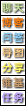
<style>
.page{position:relative;width:26px;height:106px}
.page>*{position:absolute;margin:0}
.t1{font:10.5px "FZY4JW--GB1-0";letter-spacing:0.1em;color:#c8e19d}
.t2{font:10.5px "FZY4JW--GB1-0";letter-spacing:0.1em;color:#ff7d0a}
.t3{font:10.5px "FZY4JW--GB1-0";letter-spacing:0.1em;color:#8dcff4}
.t4{font:10.5px "FZY4JW--GB1-0";letter-spacing:0.1em;color:#facd8a}
.t5{font:10.5px "FZY4JW--GB1-0";letter-spacing:0.1em;color:#fff569}
.t6{font:10.5px "FZY4JW--GB1-0";letter-spacing:0.1em;color:#c79c6e}
.t7{font:10.5px "FZY4JW--GB1-0";letter-spacing:0.1em;color:#c0a5ff}
</style>
<div class="page">
<p class="t1" style="left:1px;top:2px;width:23px;height:11px">聊天</p>
<p class="t2" style="left:2px;top:17px;width:21px;height:11px">博客</p>
<p class="t3" style="left:2px;top:32px;width:22px;height:11px">问答</p>
<p class="t4" style="left:2px;top:47px;width:21px;height:10px">导图</p>
<p class="t5" style="left:2px;top:62px;width:22px;height:11px">分享</p>
<p class="t6" style="left:1px;top:77px;width:23px;height:11px">维基</p>
<p class="t7" style="left:2px;top:92px;width:22px;height:10px">任务</p>
</div>
